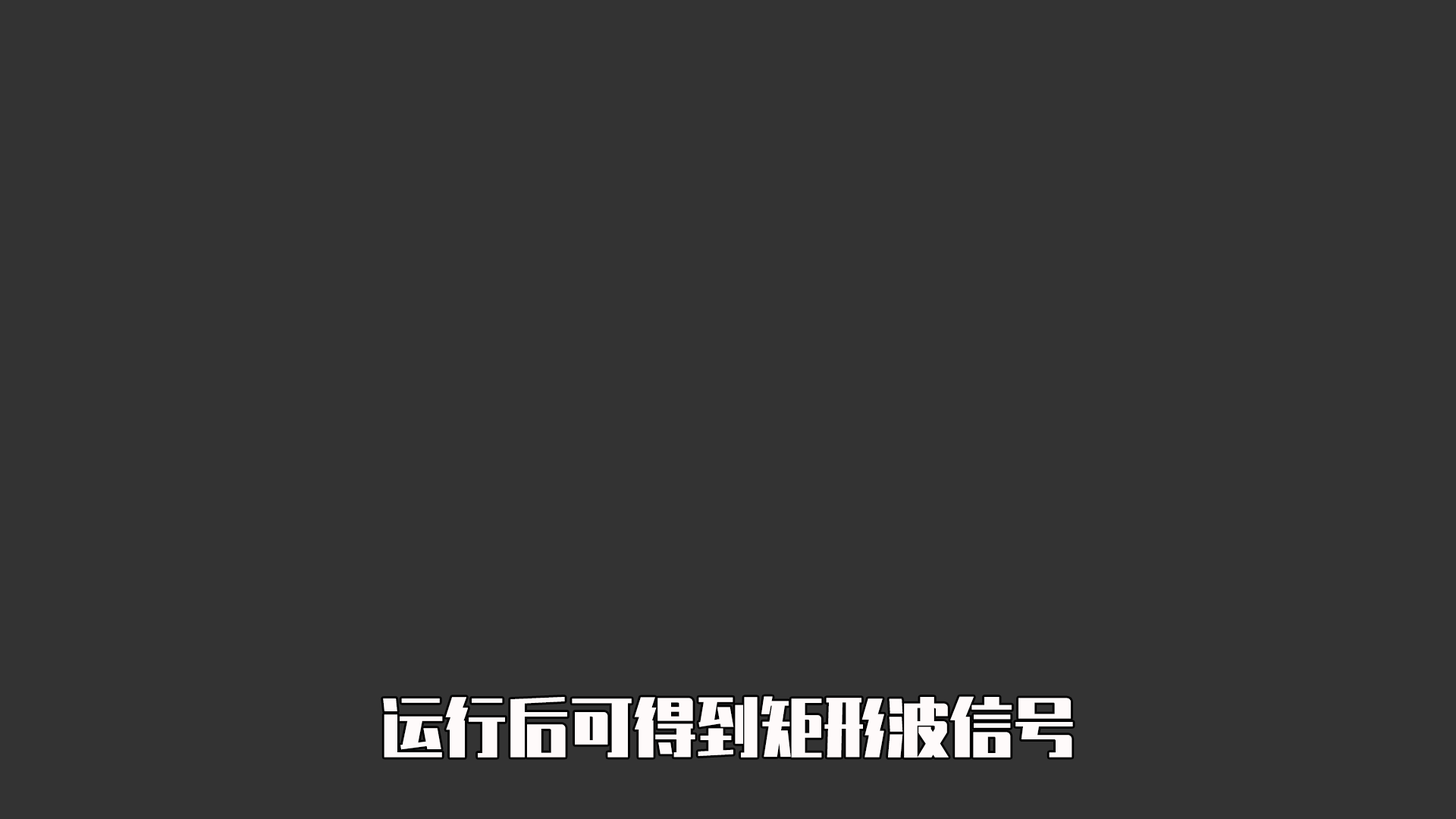
<style>
.page{position:relative;width:1456px;height:819px;background:#333333}
.page>*{position:absolute;margin:0}
.t1{font:63.2px "ZhenyanGB-Regular";color:#fefafa}
</style>
<div class="page">
<p class="t1" style="left:383px;top:696px;width:690px;height:62px">运行后可得到矩形波信号</p>
</div>
